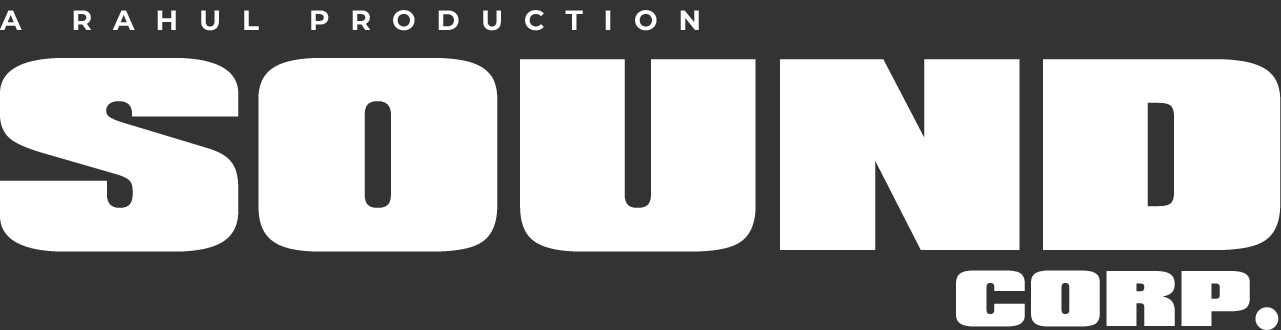
<style>
.page{position:relative;width:1281px;height:330px;background:#ffffff}
.page>*{position:absolute;margin:0}
.t1{font:28px "Montserrat-Bold";letter-spacing:0.75em;color:#ffffff}
.t2{font:235.1px "Padaloma";color:#ffffff}
.t3{font:67.7px "Padaloma";color:#ffffff}
</style>
<div class="page">
<p class="t1" style="left:0px;top:10px;width:699px;height:21px">A RAHUL PRODUCTION</p>
<p class="t2" style="left:0px;top:58px;width:1281px;height:194px">SOUND</p>
<p class="t3" style="left:956px;top:270px;width:323px;height:60px">CORP.</p>
</div>
